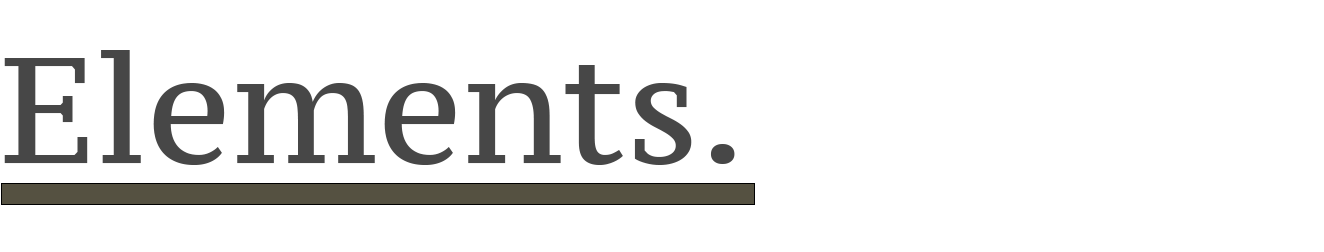
<style>
.page{position:relative;width:1324px;height:252px;background:#ffffff}
.page>*{position:absolute;margin:0}
.t1{font:150px "PTSerif-Caption";color:#474747}
</style>
<div class="page">
<p class="t1" style="left:4px;top:50px;width:731px;height:115px">Elements.</p>
</div>
